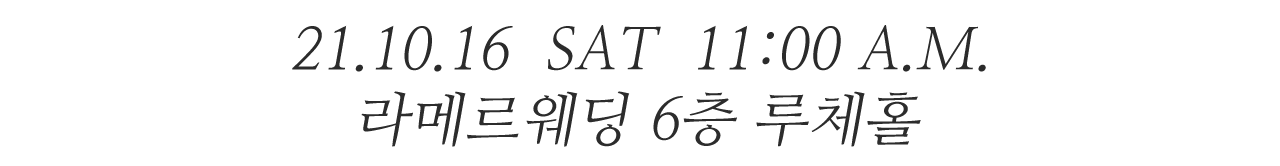
<style>
.page{position:relative;width:1280px;height:166px;background:#ffffff}
.page>*{position:absolute;margin:0}
.t1{font:58.3px "NanumMyeongjo";color:#2b2b2b;font-style:italic}
.t2{font:58.3px "NanumMyeongjo";color:#2c2c2c;font-style:italic}
</style>
<div class="page">
<p class="t1" style="left:292px;top:25px;width:694px;height:47px">21.10.16  SAT  11:00 A.M.</p>
<p class="t2" style="left:361px;top:91px;width:560px;height:56px">라메르웨딩 6층 루체홀</p>
</div>
